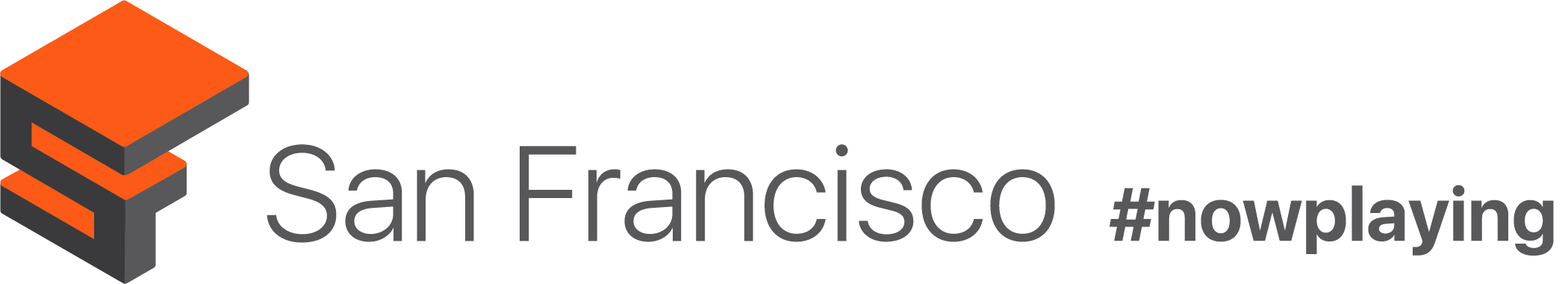
<style>
.page{position:relative;width:1568px;height:284px;background:#ffffff}
.page>*{position:absolute;margin:0}
.t1{font:134.4px "SFUIDisplay-Light";color:#58585a}
.t2{font:74.7px "SFUIDisplay-Bold";color:#58585a}
</style>
<div class="page">
<p class="t1" style="left:267px;top:144px;width:1287px;height:111px">San Francisco   <span class="t2">#nowplaying</span></p>
</div>
